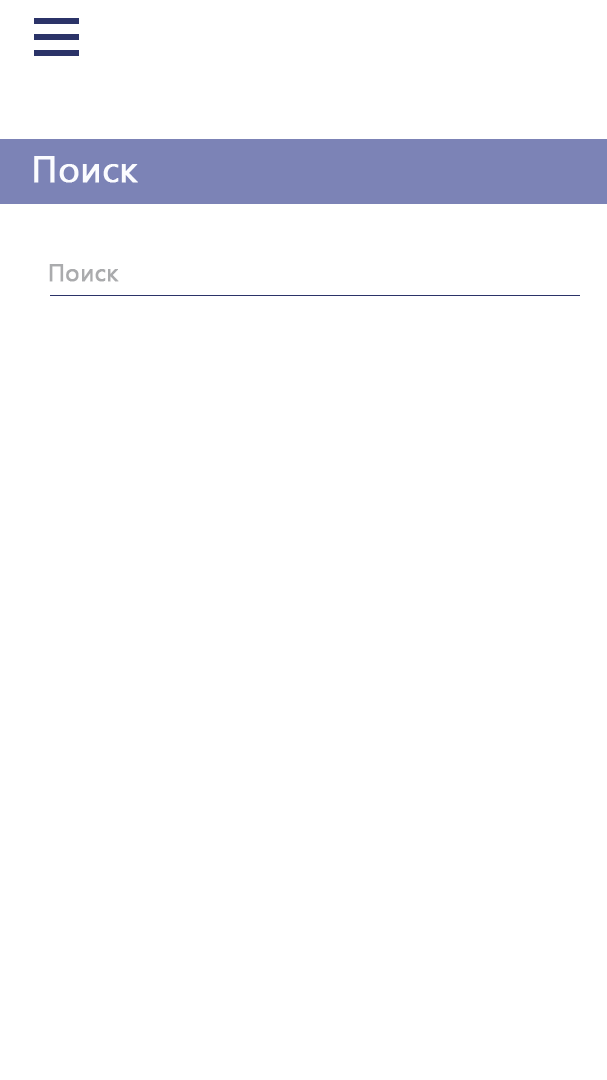
<style>
.page{position:relative;width:607px;height:1080px;background:#ffffff}
.page>*{position:absolute;margin:0}
.t1{font:36px "YuGothicUI-Regular";color:#fbfcff;font-weight:bold}
.t2{font:24px "YuGothicUI-Regular";color:#aaabad;font-weight:bold}
</style>
<div class="page">
<p class="t1" style="left:34px;top:156px;width:104px;height:27px">Поиск</p>
<p class="t2" style="left:49px;top:264px;width:70px;height:18px">Поиск</p>
</div>
